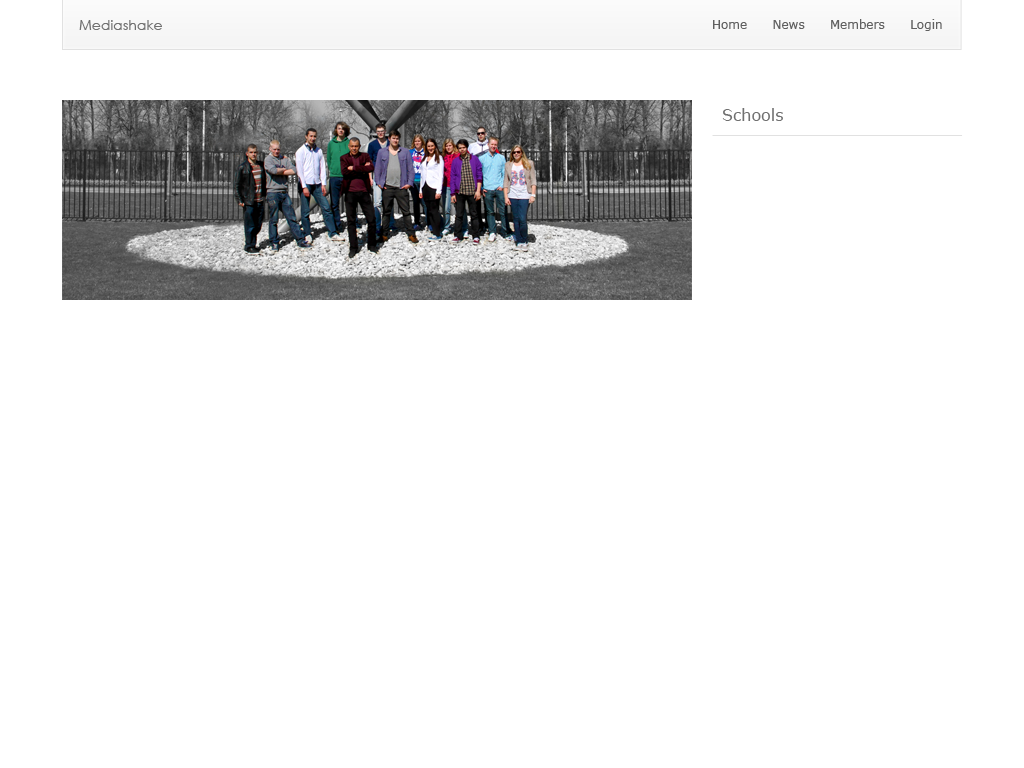
<style>
.page{position:relative;width:1024px;height:768px;background:#ffffff}
.page>*{position:absolute;margin:0}
.t1{font:14px "CenturyGothic";color:#707070}
.t2{font:12px "Verdana";color:#606060}
.t3{font:16px "Verdana";color:#707070}
</style>
<div class="page">
<p class="t1" style="left:79px;top:20px;width:83px;height:10px">Mediashake</p>
<p class="t2" style="left:713px;top:19px;width:229px;height:12px">Home      News      Members      Login</p>
<p class="t3" style="left:722px;top:108px;width:61px;height:13px">Schools</p>
</div>
